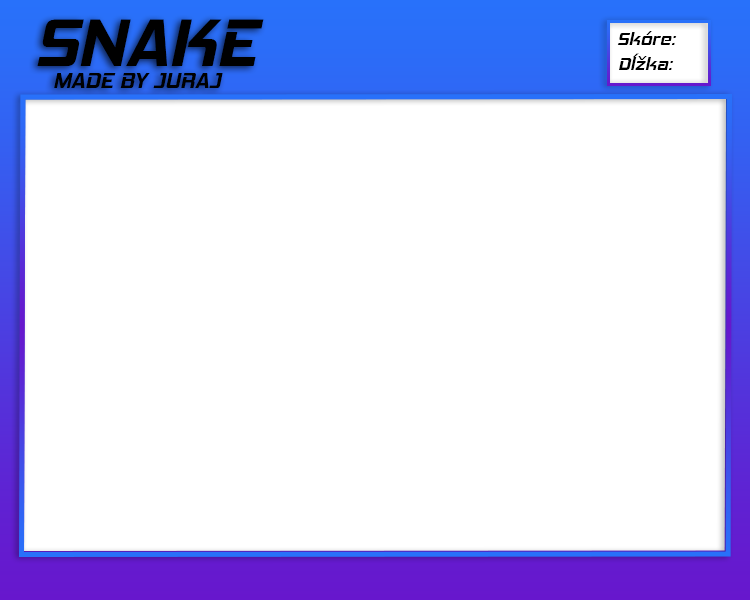
<style>
.page{position:relative;width:750px;height:600px;background:#ffffff}
.page>*{position:absolute;margin:0}
.t1{font:67.1px "HemiHeadRg-BoldItalic";color:#000000}
.t2{font:18px "HemiHeadRg-BoldItalic";color:#000000}
.t3{font:22.1px "HemiHeadRg-BoldItalic";color:#000000}
</style>
<div class="page">
<p class="t1" style="left:37px;top:19px;width:227px;height:47px">SNAKE</p>
<p class="t2" style="left:617px;top:31px;width:60px;height:14px">Skóre:</p>
<p class="t2" style="left:619px;top:53px;width:55px;height:17px">Dĺžka:</p>
<p class="t3" style="left:54px;top:73px;width:169px;height:15px">MADE BY JURAJ</p>
</div>
